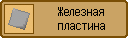
<style>
.page{position:relative;width:128px;height:38px;background:#caa364}
.page>*{position:absolute;margin:0}
.t1{font:12px "XENOA";color:#000000}
</style>
<div class="page">
<p class="t1" style="left:58px;top:7px;width:47px;height:23px;text-align:center">Железная<br>пластина</p>
</div>
